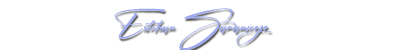
<style>
.page{position:relative;width:400px;height:50px;background:#ffffff}
.page>*{position:absolute;margin:0}
.t1{font:18px "Signatrue";color:#9ea9f0}
</style>
<div class="page">
<p class="t1" style="left:114px;top:8px;width:158px;height:42px;text-align:center">Esteban Samaniego</p>
</div>
